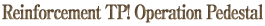
<style>
.page{position:relative;width:265px;height:26px;background:#ffffff}
.page>*{position:absolute;margin:0}
.t1{font:20px "RyuminPro-ExBold";letter-spacing:-0.08em;color:#6b573f;font-weight:bold;scale:0.79 1}
</style>
<div class="page">
<p class="t1" style="left:2px;top:4px;width:261px;height:19px">Reinforcement TP! Operation Pedestal</p>
</div>
